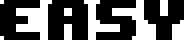
<style>
.page{position:relative;width:184px;height:40px;background:#000000}
.page>*{position:absolute;margin:0}
.t1{font:48px "8BITWONDERNominal";color:#000000}
</style>
<div class="page">
<p class="t1" style="left:0px;top:0px;width:184px;height:40px">Easy</p>
</div>
